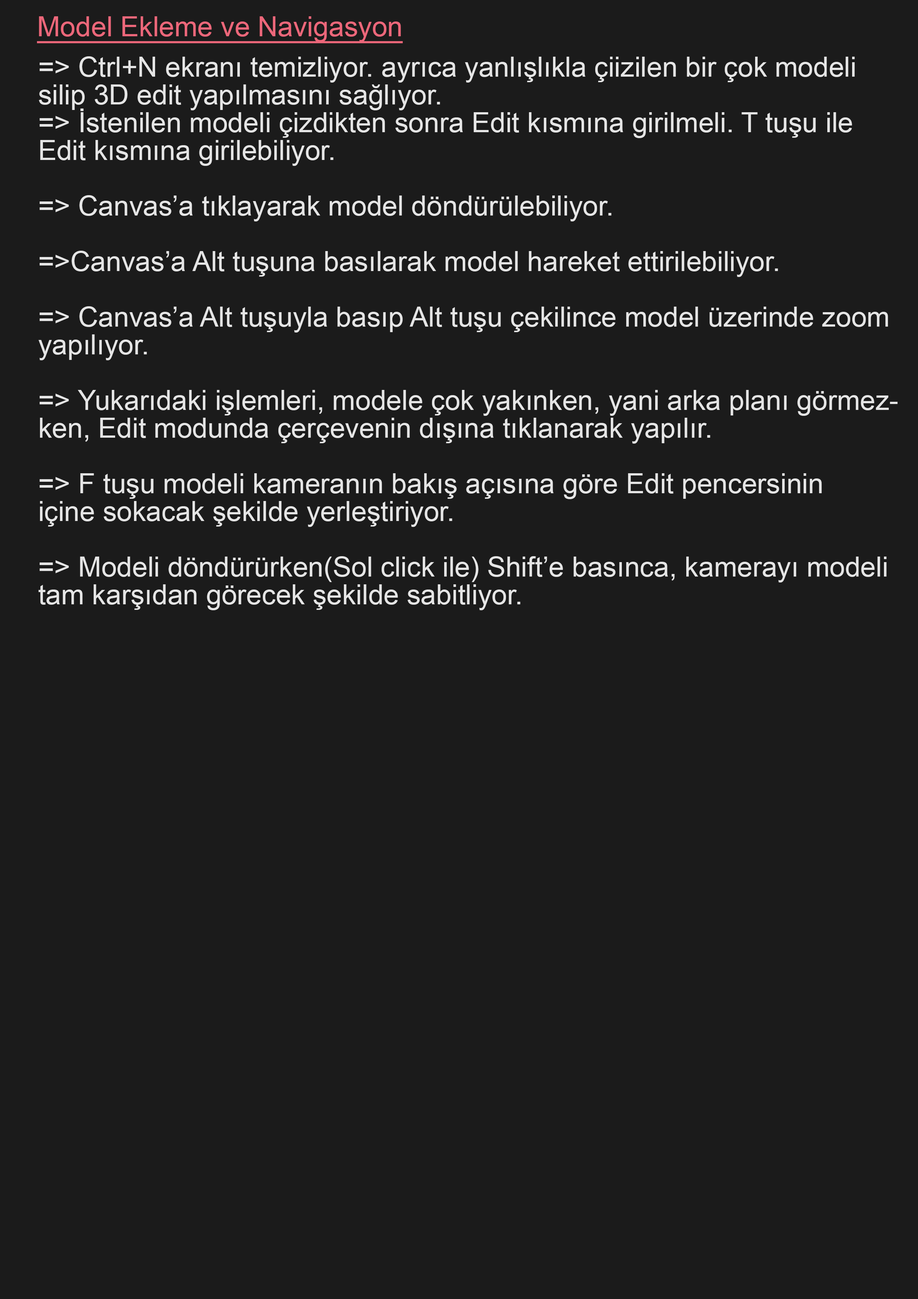
<style>
.page{position:relative;width:918px;height:1299px;background:#1b1b1b}
.page>*{position:absolute;margin:0}
.t1{font:27.8px "ArialMT";color:#ec677a;text-decoration:underline}
.t2{font:27.8px/27.8px "ArialMT";color:#e5e5e5}
</style>
<div class="page">
<p class="t1" style="left:37px;top:16px;width:366px;height:27px">Model Ekleme ve Navigasyon</p>
<p class="t2" style="left:39px;top:56px;width:859px;height:554px">=&gt; Ctrl+N ekranı temizliyor. ayrıca yanlışlıkla çiizilen bir çok modeli <br>silip 3D edit yapılmasını sağlıyor.<br>=&gt; İstenilen modeli çizdikten sonra Edit kısmına girilmeli. T tuşu ile<br>Edit kısmına girilebiliyor.<br><br>=&gt; Canvas’a tıklayarak model döndürülebiliyor.<br><br>=&gt;Canvas’a Alt tuşuna basılarak model hareket ettirilebiliyor.<br><br>=&gt; Canvas’a Alt tuşuyla basıp Alt tuşu çekilince model üzerinde zoom<br>yapılıyor.<br><br>=&gt; Yukarıdaki işlemleri, modele çok yakınken, yani arka planı görmez-<br>ken, Edit modunda çerçevenin dışına tıklanarak yapılır.<br><br>=&gt; F tuşu modeli kameranın bakış açısına göre Edit pencersinin<br>içine sokacak şekilde yerleştiriyor.<br><br>=&gt; Modeli döndürürken(Sol click ile) Shift’e basınca, kamerayı modeli <br>tam karşıdan görecek şekilde sabitliyor.</p>
</div>
